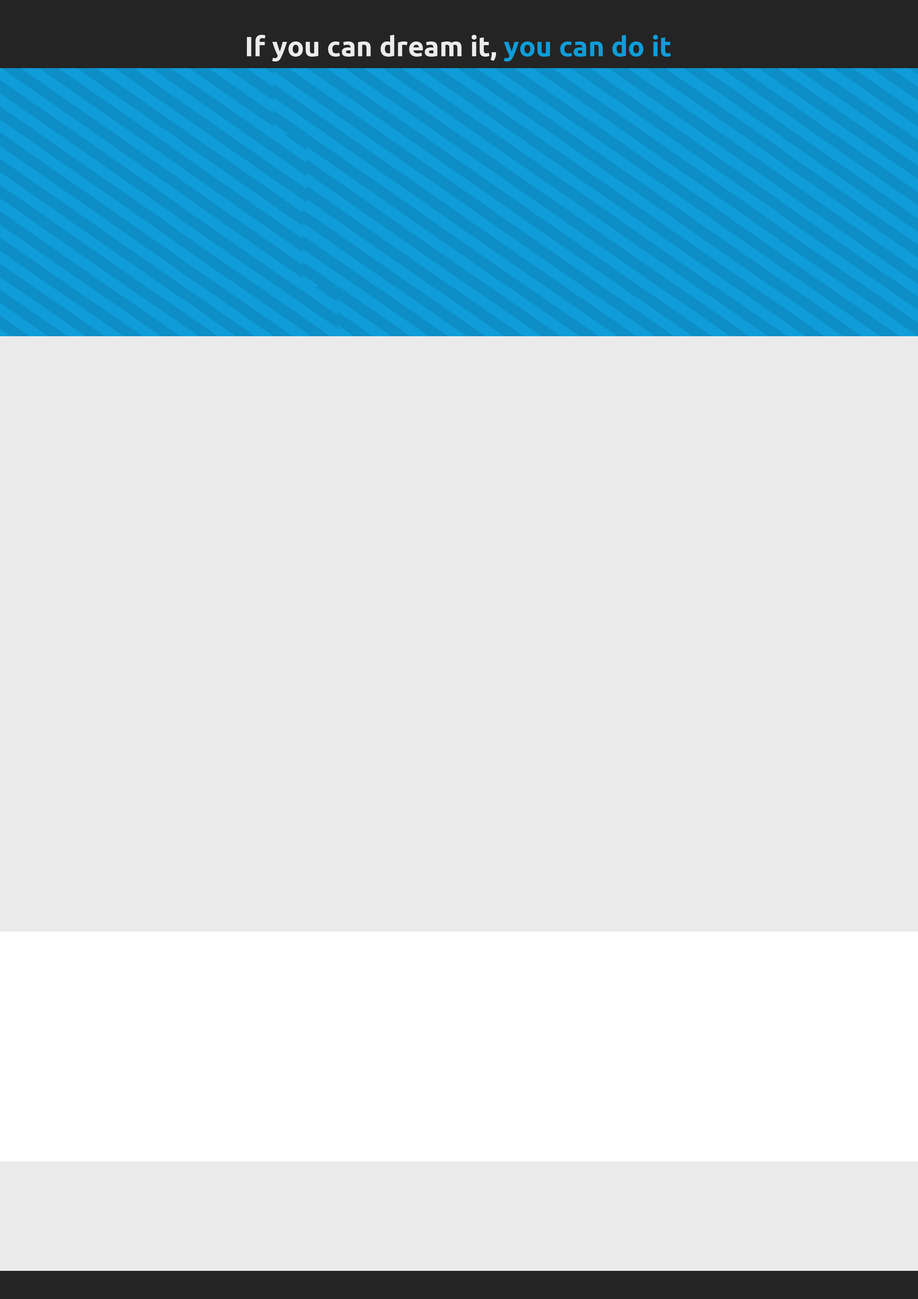
<style>
.page{position:relative;width:918px;height:1299px;background:#ebebeb}
.page>*{position:absolute;margin:0}
.t1{font:27.8px "Ubuntu-Bold";color:#ebebeb}
.t2{font:27.8px "Ubuntu-Bold";color:#0f9cd9}
</style>
<div class="page">
<p class="t1" style="left:247px;top:35px;width:424px;height:26px">If you can dream it, <span class="t2">you can do it</span></p>
</div>
